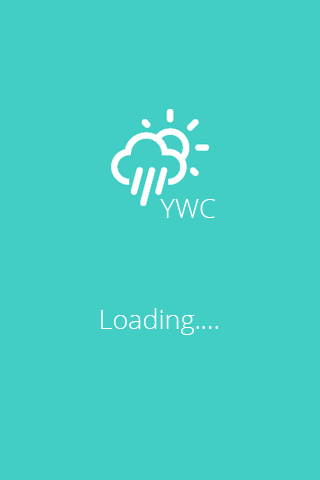
<style>
.page{position:relative;width:320px;height:480px;background:#42cec5}
.page>*{position:absolute;margin:0}
.t1{font:26.8px "OpenSans-Light";color:#ffffff}
</style>
<div class="page">
<p class="t1" style="left:160px;top:199px;width:55px;height:19px">YWC</p>
<p class="t1" style="left:101px;top:308px;width:117px;height:27px">Loading....</p>
</div>
